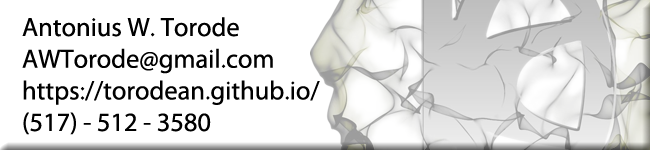
<style>
.page{position:relative;width:650px;height:150px;background:#ffffff}
.page>*{position:absolute;margin:0}
.t1{font:26.4px "MyriadPro-Regular";color:#000000}
</style>
<div class="page">
<p class="t1" style="left:22px;top:17px;width:298px;height:118px">Antonius W. Torode<br>AWTorode@gmail.com<br>https://torodean.github.io/<br>(517) - 512 - 3580</p>
</div>
